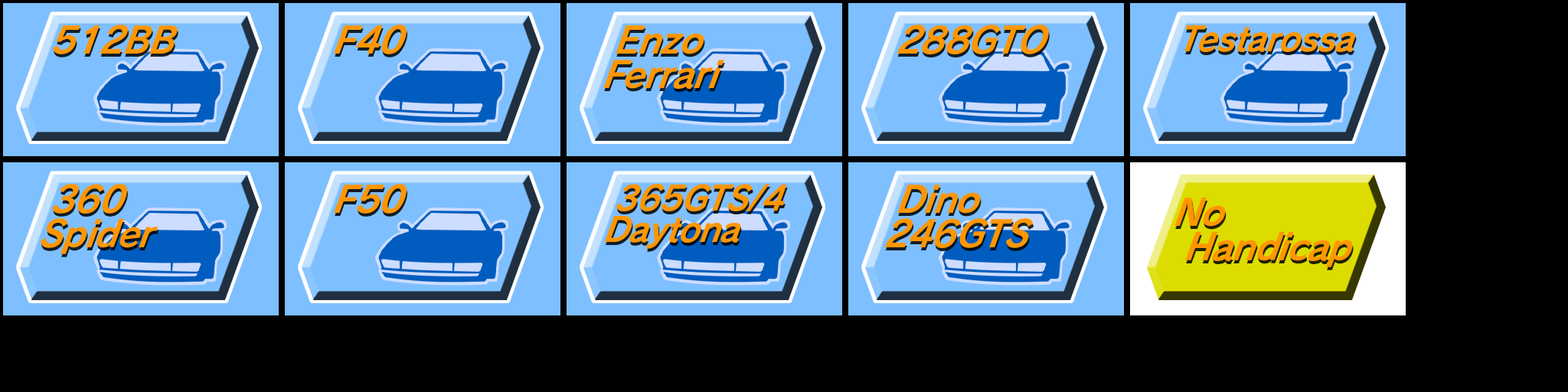
<style>
.page{position:relative;width:1568px;height:392px;background:#000000}
.page>*{position:absolute;margin:0}
.t1{font:38.3px "RodinPro-B";letter-spacing:-0.025em;color:#ff9600;scale:0.94 1}
.t2{font:38.3px/36.8px "RodinPro-B";letter-spacing:-0.025em;color:#ff9600;scale:0.94 1}
.t3{font:35.2px "RodinPro-B";letter-spacing:-0.025em;color:#ff9600;scale:0.94 1}
.t4{font:35.2px/33.7px "RodinPro-B";letter-spacing:-0.025em;color:#ff9600;scale:0.94 1}
</style>
<div class="page">
<p class="t1" style="left:53px;top:24px;width:125px;height:30px">512BB</p>
<p class="t1" style="left:334px;top:24px;width:73px;height:30px">F40</p>
<p class="t2" style="left:603px;top:25px;width:121px;height:64px">Enzo<br>Ferrari</p>
<p class="t1" style="left:897px;top:24px;width:152px;height:30px">288GTO</p>
<p class="t3" style="left:1184px;top:25px;width:172px;height:27px">Testarossa</p>
<p class="t2" style="left:41px;top:184px;width:117px;height:70px">360<br>Spider</p>
<p class="t1" style="left:334px;top:184px;width:73px;height:30px">F50</p>
<p class="t4" style="left:605px;top:184px;width:182px;height:65px">365GTS/4<br>Daytona</p>
<p class="t2" style="left:884px;top:185px;width:149px;height:63px">Dino<br>246GTS</p>
<p class="t1" style="left:1174px;top:198px;width:52px;height:29px">No</p>
<p class="t1" style="left:1185px;top:232px;width:168px;height:35px">Handicap</p>
</div>
